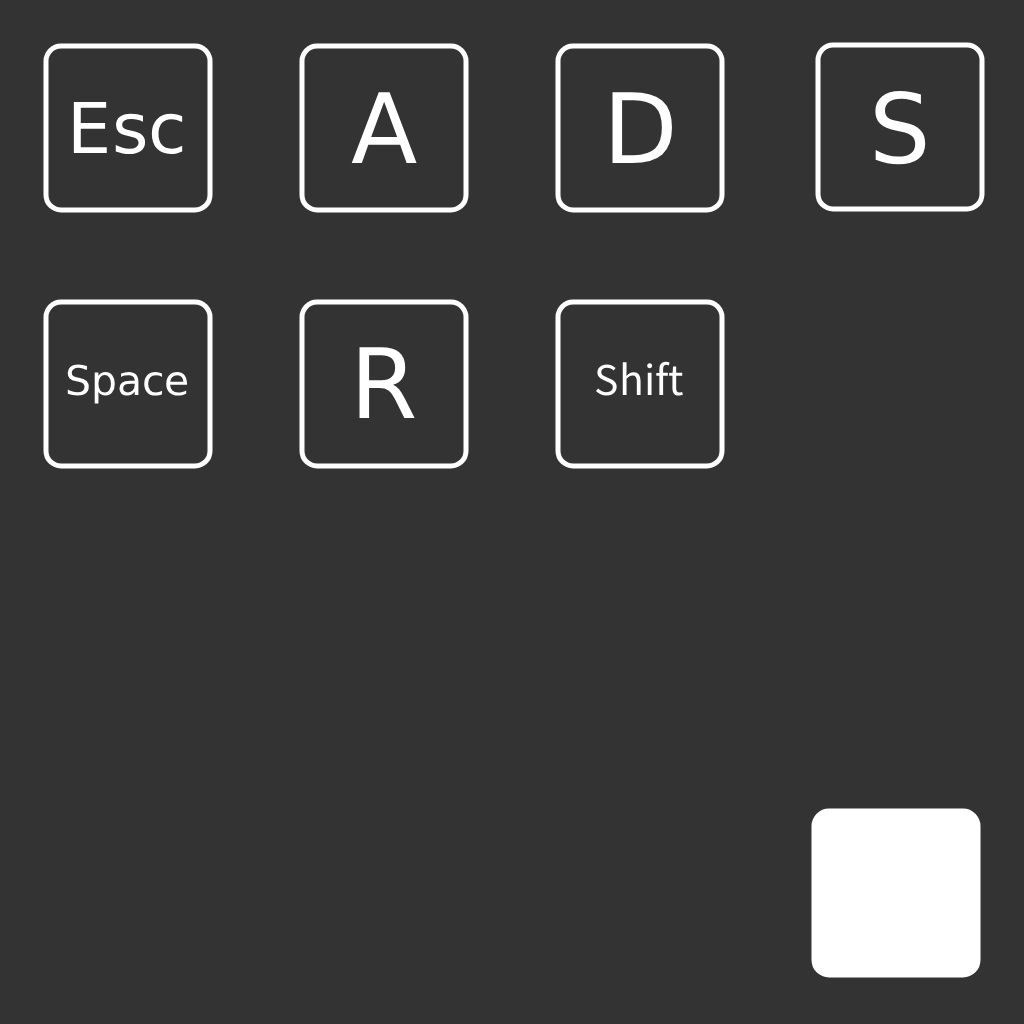
<style>
.page{position:relative;width:1024px;height:1024px;background:#333333}
.page>*{position:absolute;margin:0}
.t1{font:70px "DejaVuSans";color:#ffffff}
.t2{font:97px "DejaVuSans";color:#ffffff}
.t3{font:41px "DejaVuSans";color:#ffffff}
.t4{font:41px "NotoSansKR-Regular";color:#ffffff}
</style>
<div class="page">
<p class="t1" style="left:73px;top:101px;width:110px;height:53px">Esc</p>
<p class="t2" style="left:351px;top:92px;width:66px;height:71px">A</p>
<p class="t2" style="left:612px;top:92px;width:60px;height:71px">D</p>
<p class="t2" style="left:875px;top:91px;width:51px;height:74px">S</p>
<p class="t2" style="left:359px;top:347px;width:56px;height:71px">R</p>
<p class="t3" style="left:67px;top:364px;width:121px;height:40px">Space</p>
<p class="t4" style="left:595px;top:361px;width:88px;height:35px">Shift</p>
</div>
